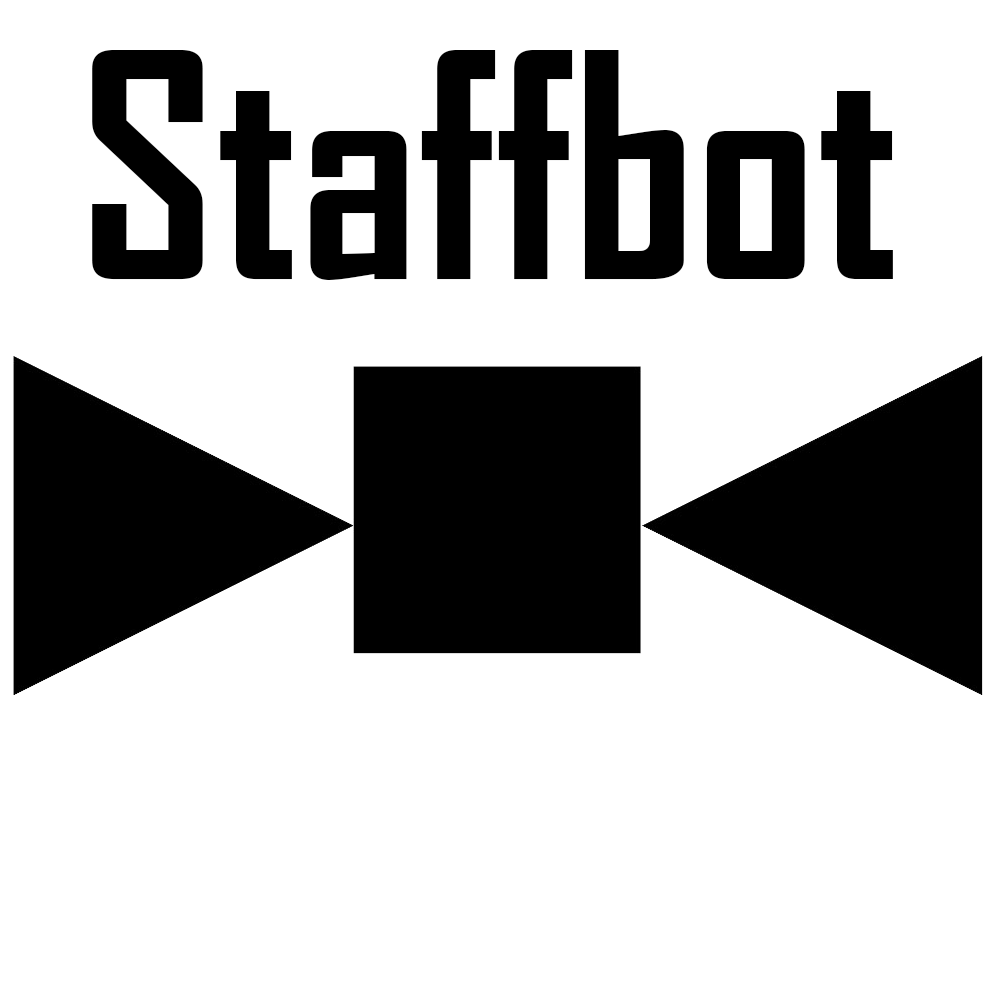
<style>
.page{position:relative;width:1000px;height:1000px;background:#ffffff}
.page>*{position:absolute;margin:0}
.t1{font:300px "AgencyFB-Bold";color:#000000}
</style>
<div class="page">
<p class="t1" style="left:92px;top:50px;width:801px;height:230px">Staffbot</p>
</div>
